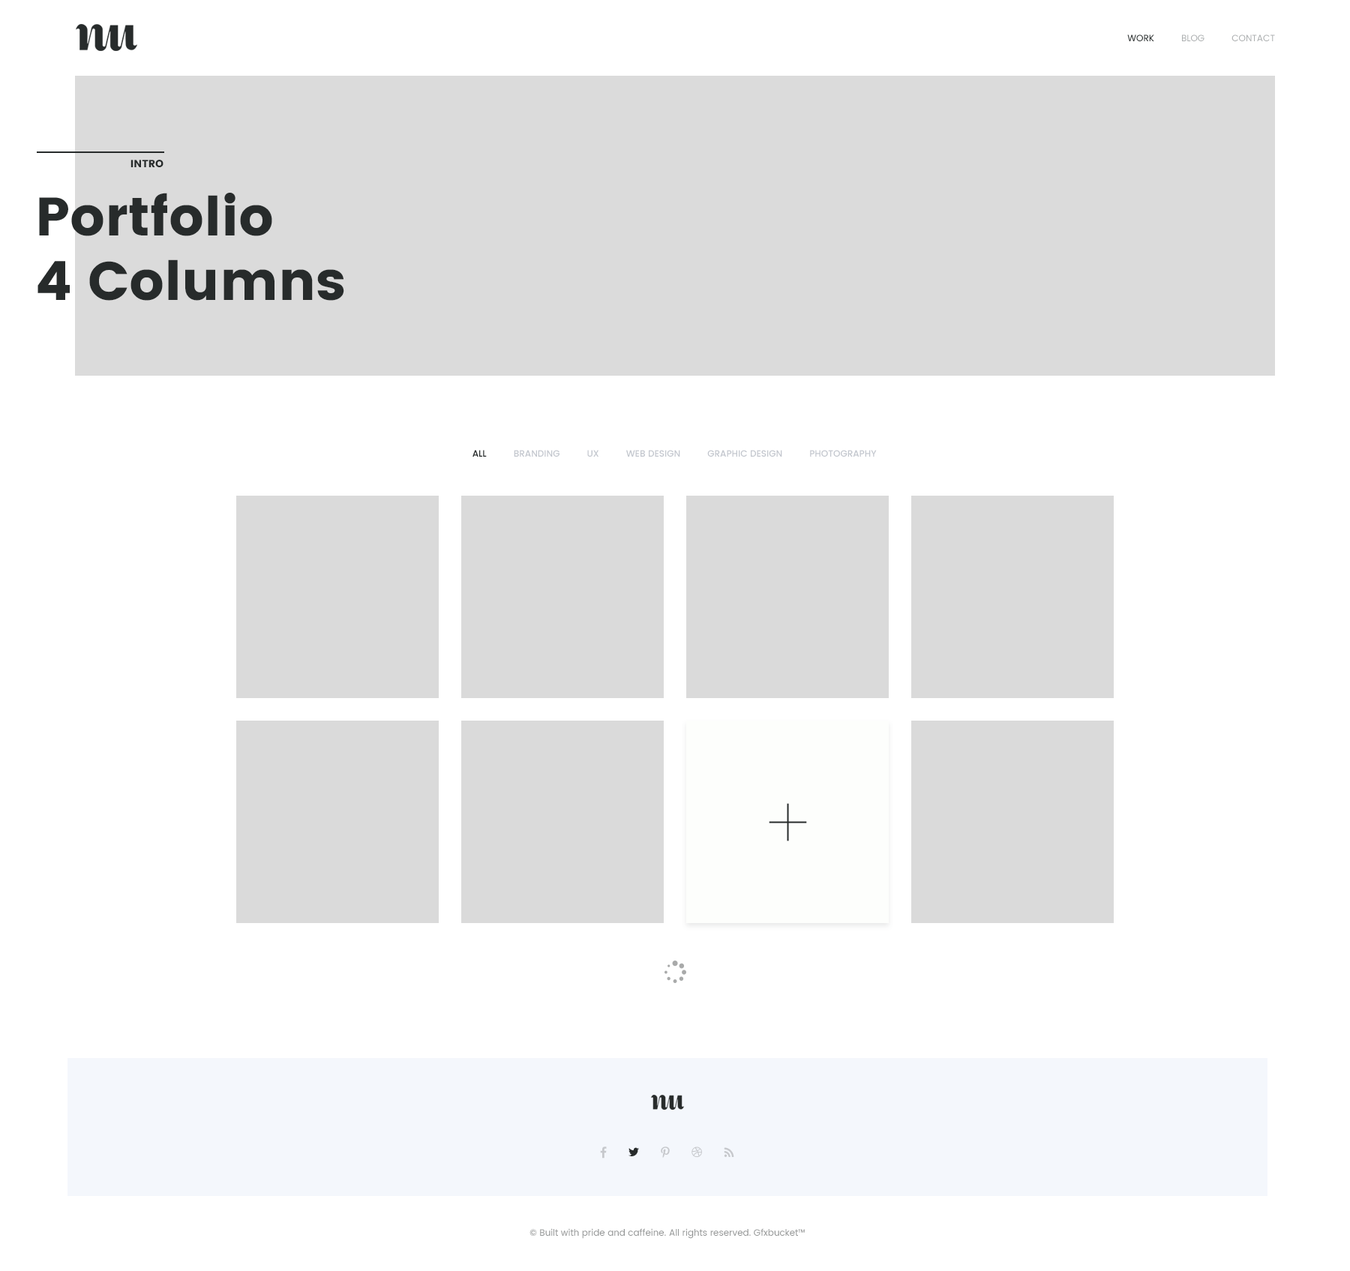
<style>
.page{position:relative;width:1350px;height:1271px;background:#ffffff}
.page>*{position:absolute;margin:0}
.t1{font:9px "Poppins-Regular";color:#abaeaf;text-transform:uppercase}
.t2{font:9px "Poppins-Regular";color:#272b2b;text-transform:uppercase}
.t3{font:10.5px "Poppins";color:#272b2b;text-transform:uppercase}
.t4{font:54px "Poppins";color:#272b2b}
.t5{font:9px "Poppins-Medium";color:#c2c6cd;text-transform:uppercase}
.t6{font:9px "Poppins-Medium";color:#272b2b;text-transform:uppercase}
.t7{font:9px "Poppins-Regular";color:#949696}
</style>
<div class="page">
<p class="t1" style="left:1127px;top:34px;width:148px;height:7px"><span class="t2">         work  </span>        Blog          contact</p>
<p class="t3" style="left:130px;top:160px;width:34px;height:7px">Intro</p>
<p class="t4" style="left:38px;top:193px;width:306px;height:108px">Portfolio<br>4 Columns</p>
<p class="t5" style="left:472px;top:450px;width:405px;height:7px"><span class="t6">All         </span> Branding          UX          WEB DESIGN          GRAPHIC DESIGN          PHOTOGRAPHY</p>
<p class="t7" style="left:530px;top:1228px;width:275px;height:11px">© Built with pride and caffeine. All rights reserved. Gfxbucket™</p>
</div>
